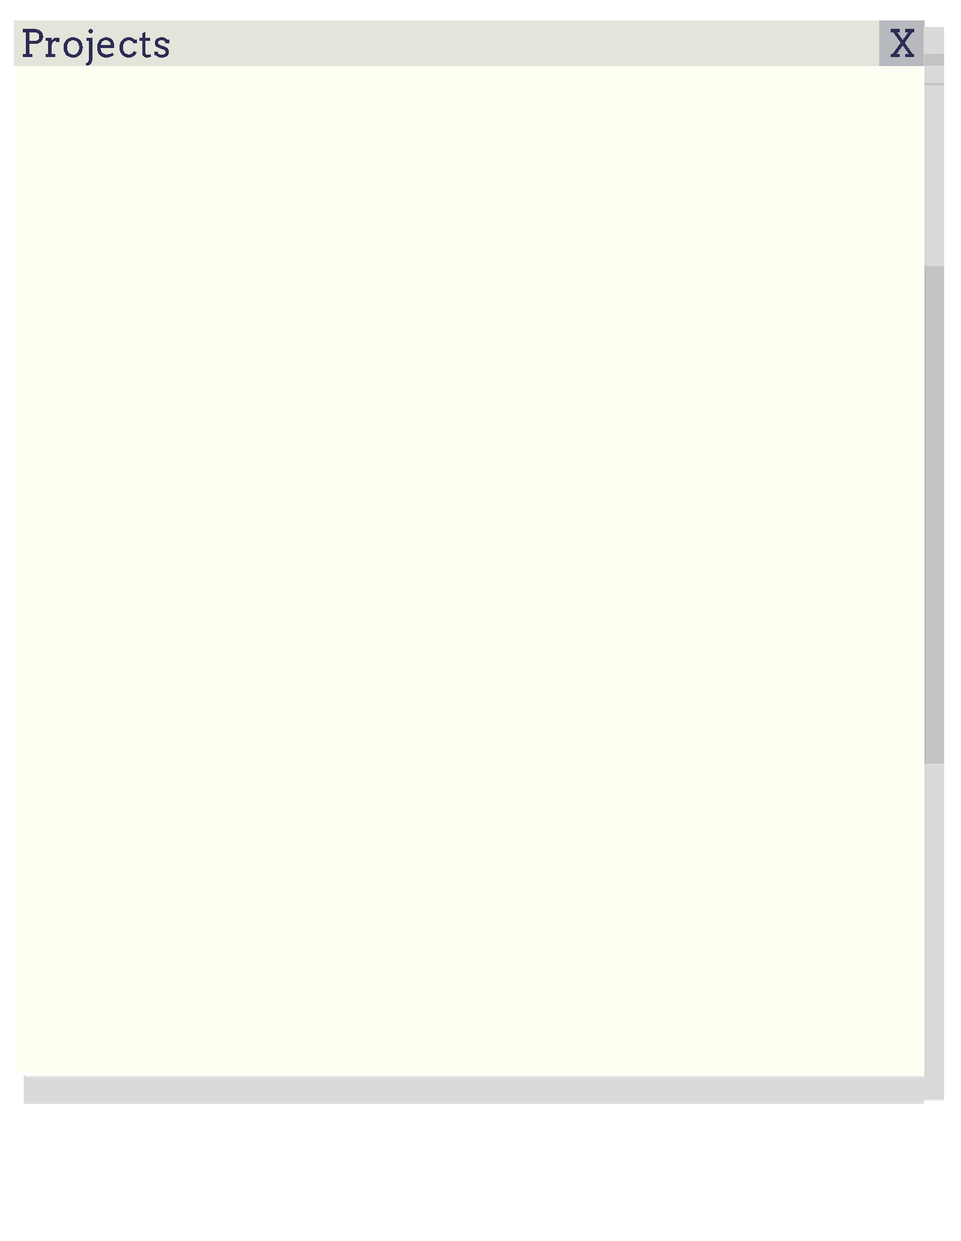
<style>
.page{position:relative;width:961px;height:1241px;background:#fdfff2}
.page>*{position:absolute;margin:0}
.t1{font:38px "Arvo";color:#2c2c54}
</style>
<div class="page">
<p class="t1" style="left:23px;top:29px;width:146px;height:36px">Projects</p>
<p class="t1" style="left:890px;top:29px;width:24px;height:28px">X</p>
</div>
